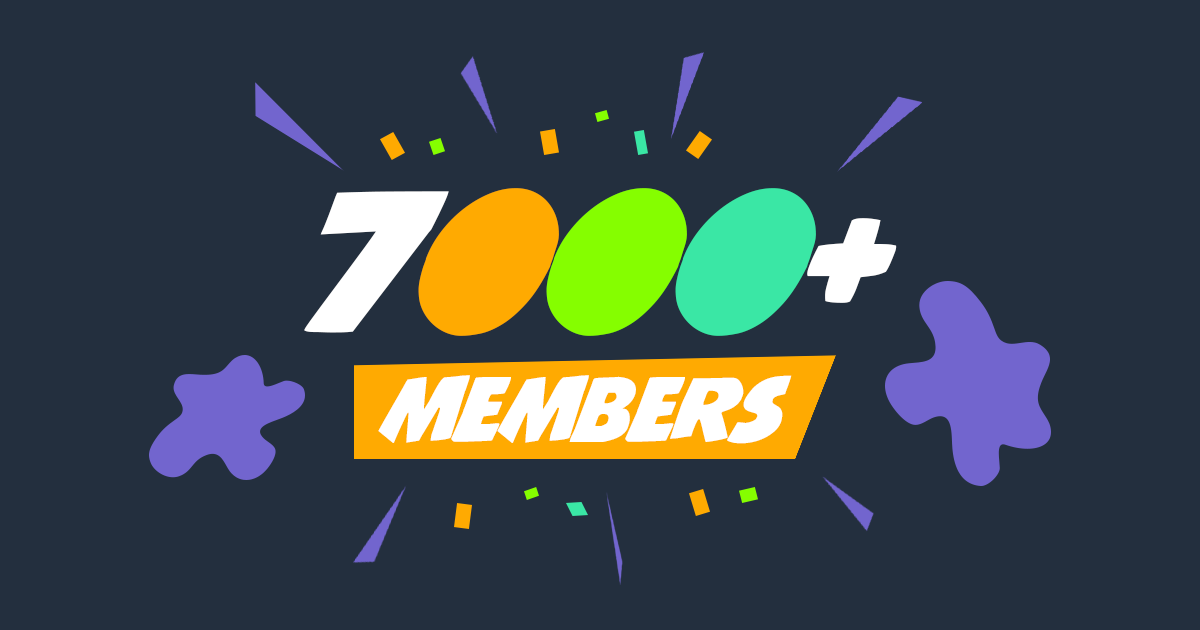
<style>
.page{position:relative;width:1200px;height:630px;background:#232f3e}
.page>*{position:absolute;margin:0}
.t1{font:90px "Jack'sCandlestick";color:#ffffff}
.t2{font:200px "Jack'sCandlestick";color:#ffffff}
.t3{font:200px "Jack'sCandlestick";color:#ffaa01}
.t4{font:200px "Jack'sCandlestick";color:#85fe00}
.t5{font:200px "Jack'sCandlestick";color:#3ae7a5}
</style>
<div class="page">
<p class="t1" style="left:304px;top:188px;width:593px;height:256px;text-align:center"><span class="t2">7</span><span class="t3">0</span><span class="t4">0</span><span class="t5">0</span><span class="t2">+<br></span>MEMBERS</p>
</div>
